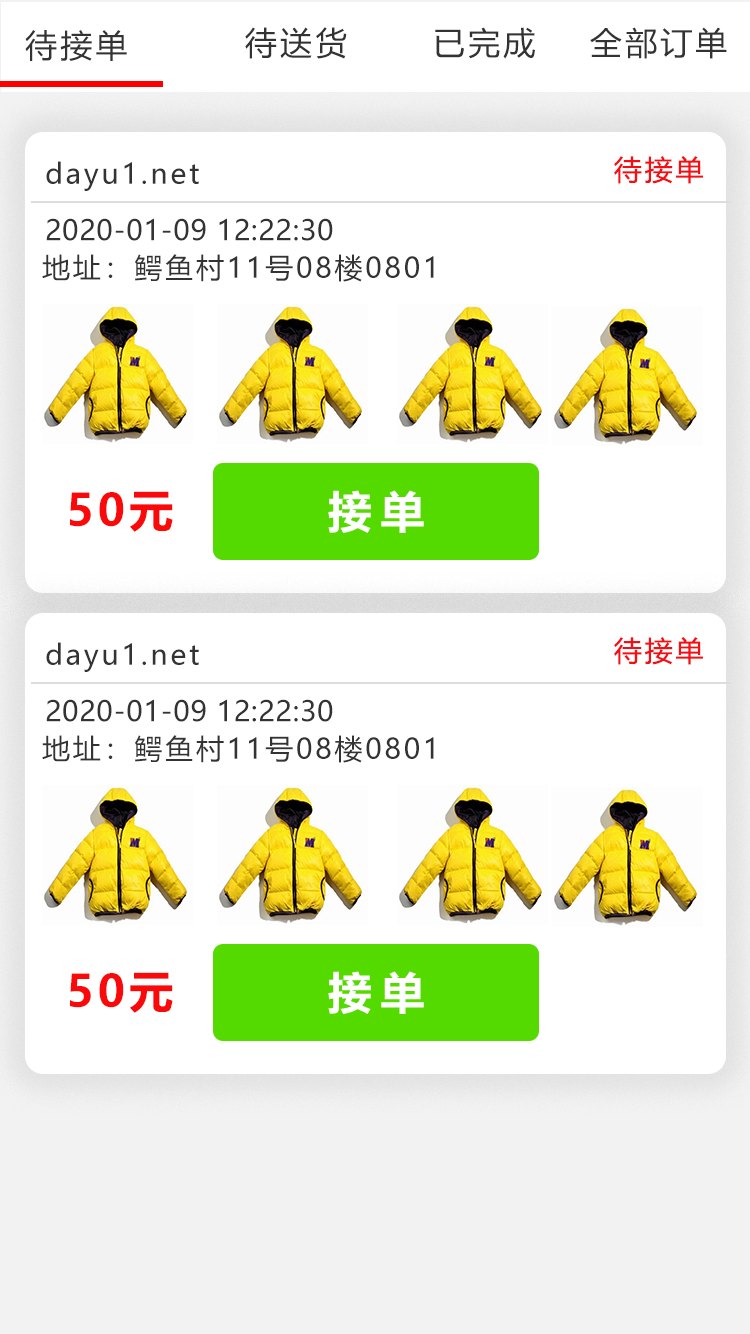
<style>
.page{position:relative;width:750px;height:1334px;background:#ffffff}
.page>*{position:absolute;margin:0}
.t1{font:32px "MicrosoftYaHei";letter-spacing:0.1em;color:#333333}
.t2{font:28px "MicrosoftYaHei";letter-spacing:0.1em;color:#333333}
.t3{font:28px "MicrosoftYaHei";letter-spacing:0.1em;color:#f80d12}
.t4{font:28px "MicrosoftYaHei";letter-spacing:0.025em;color:#333333}
.t5{font:44px "MicrosoftYaHei-Bold";letter-spacing:0.1em;color:#f90909}
</style>
<div class="page">
<p class="t1" style="left:25px;top:30px;width:102px;height:31px">待接单</p>
<p class="t1" style="left:245px;top:27px;width:102px;height:32px">待送货</p>
<p class="t1" style="left:435px;top:27px;width:100px;height:32px">已完成</p>
<p class="t1" style="left:590px;top:27px;width:137px;height:32px">全部订单</p>
<p class="t2" style="left:46px;top:161px;width:153px;height:30px">dayu1.net</p>
<p class="t3" style="left:614px;top:156px;width:89px;height:28px">待接单</p>
<p class="t4" style="left:46px;top:218px;width:287px;height:23px">2020-01-09 12:22:30</p>
<p class="t2" style="left:42px;top:254px;width:392px;height:28px">地址：鳄鱼村11号08楼0801</p>
<p class="t5" style="left:70px;top:491px;width:103px;height:41px">50元</p>
<p class="t3" style="left:614px;top:637px;width:89px;height:28px">待接单</p>
<p class="t2" style="left:46px;top:642px;width:153px;height:30px">dayu1.net</p>
<p class="t4" style="left:46px;top:699px;width:287px;height:23px">2020-01-09 12:22:30</p>
<p class="t2" style="left:42px;top:735px;width:392px;height:28px">地址：鳄鱼村11号08楼0801</p>
<p class="t5" style="left:70px;top:972px;width:103px;height:41px">50元</p>
</div>
